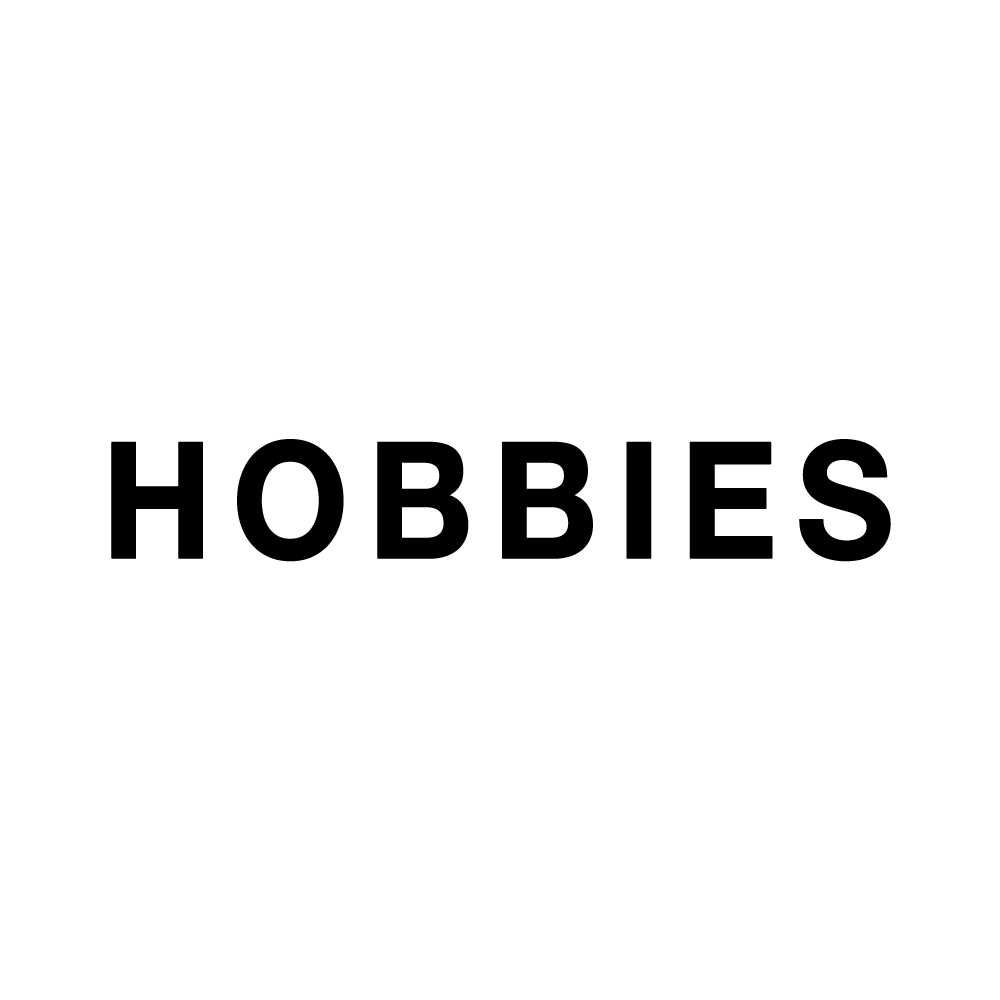
<style>
.page{position:relative;width:1000px;height:1000px;background:#ffffff}
.page>*{position:absolute;margin:0}
.t1{font:162px "HelveticaNeue-Bold";letter-spacing:0.1em;color:#000000;text-transform:uppercase;font-weight:bold;scale:0.93 1}
</style>
<div class="page">
<p class="t1" style="left:111px;top:439px;width:780px;height:123px">Hobbies</p>
</div>
